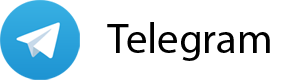
<style>
.page{position:relative;width:300px;height:80px;background:#ffffff}
.page>*{position:absolute;margin:0}
.t1{font:42.8px "MyriadPro-Regular";color:#000000}
</style>
<div class="page">
<p class="t1" style="left:107px;top:22px;width:163px;height:39px">Telegram</p>
</div>
